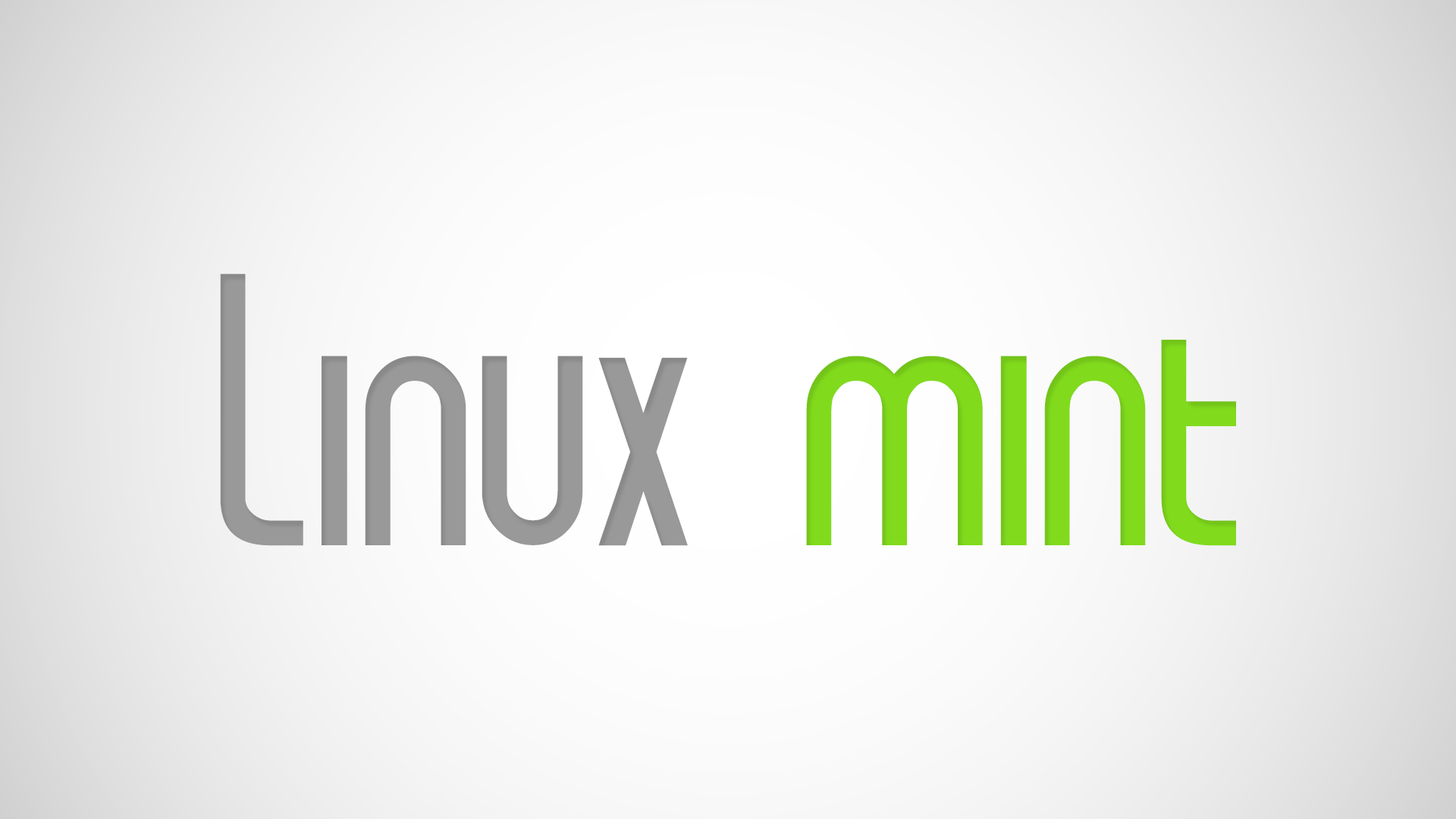
<style>
.page{position:relative;width:1456px;height:819px}
.page>*{position:absolute;margin:0}
.t1{font:410.8px "formintElegance";color:#999999}
.t2{font:410.8px "formintElegance";color:#81db1c}
</style>
<div class="page">
<p class="t1" style="left:220px;top:274px;width:1016px;height:272px">Linux <span class="t2">mint</span></p>
</div>
